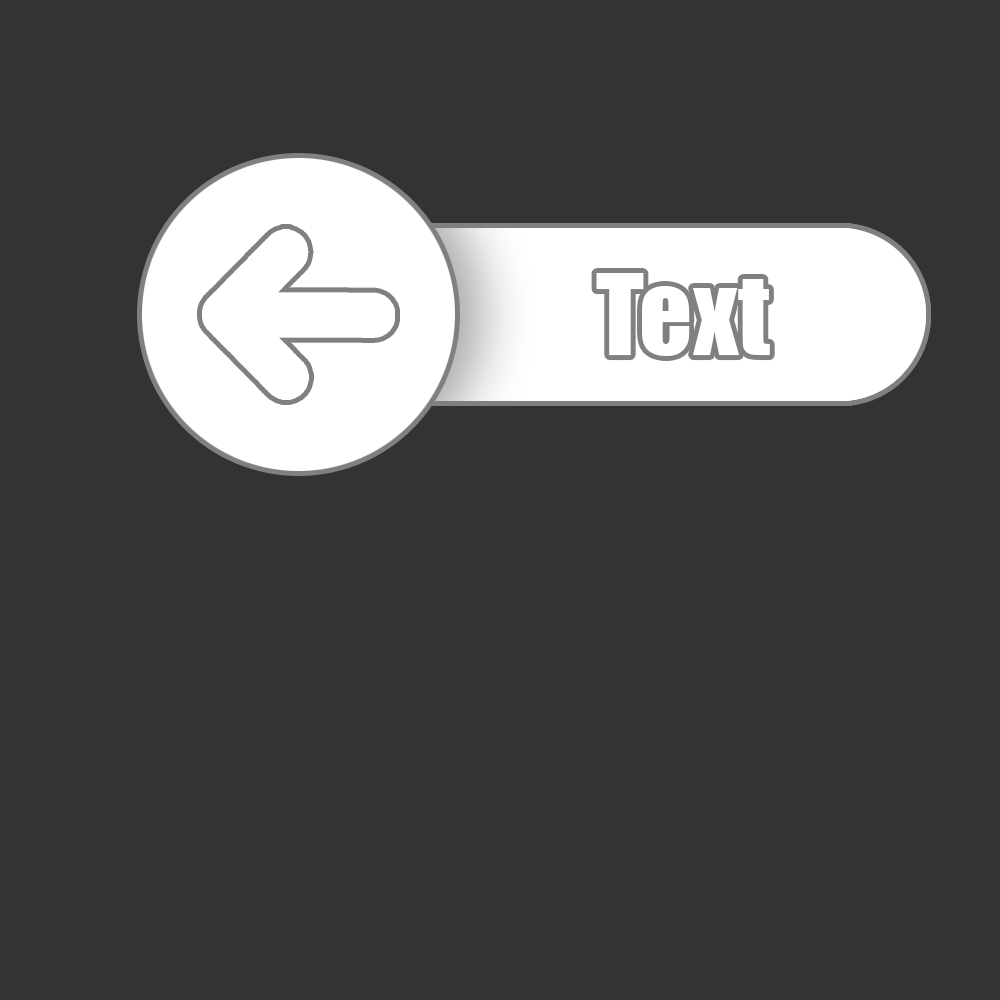
<style>
.page{position:relative;width:1000px;height:1000px;background:#333333}
.page>*{position:absolute;margin:0}
.t1{font:104.2px "Impact";color:#ffffff}
</style>
<div class="page">
<p class="t1" style="left:596px;top:273px;width:174px;height:83px">Text</p>
</div>
